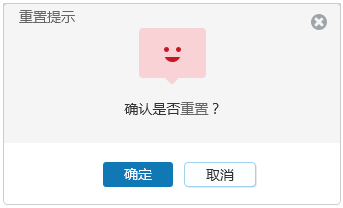
<style>
.page{position:relative;width:343px;height:208px;background:#f5f5f5}
.page>*{position:absolute;margin:0}
.t1{font:14px "MicrosoftYaHei";color:#666666}
.t2{font:14px "MicrosoftYaHei";color:#333333}
.t3{font:14px "MicrosoftYaHei";color:#ffffff}
</style>
<div class="page">
<p class="t1" style="left:19px;top:10px;width:56px;height:13px">重置提示</p>
<p class="t2" style="left:124px;top:102px;width:95px;height:13px">确认是否<span class="t1">重置</span>？</p>
<p class="t3" style="left:124px;top:168px;width:28px;height:12px">确定</p>
<p class="t2" style="left:206px;top:169px;width:28px;height:12px">取消</p>
</div>
